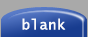
<style>
.page{position:relative;width:88px;height:37px;background:#a9a9a9}
.page>*{position:absolute;margin:0}
.t1{font:14px "LucidaConsole";color:#fbfbfb;font-weight:bold}
</style>
<div class="page">
<p class="t1" style="left:22px;top:18px;width:44px;height:12px">blank</p>
</div>
